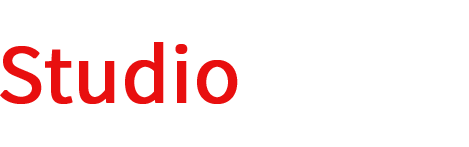
<style>
.page{position:relative;width:469px;height:147px;background:#ffffff}
.page>*{position:absolute;margin:0}
.t1{font:84px "SourceSansPro-Regular";color:#e80f0f;font-weight:bold}
</style>
<div class="page">
<p class="t1" style="left:0px;top:42px;width:238px;height:62px">Studio</p>
</div>
